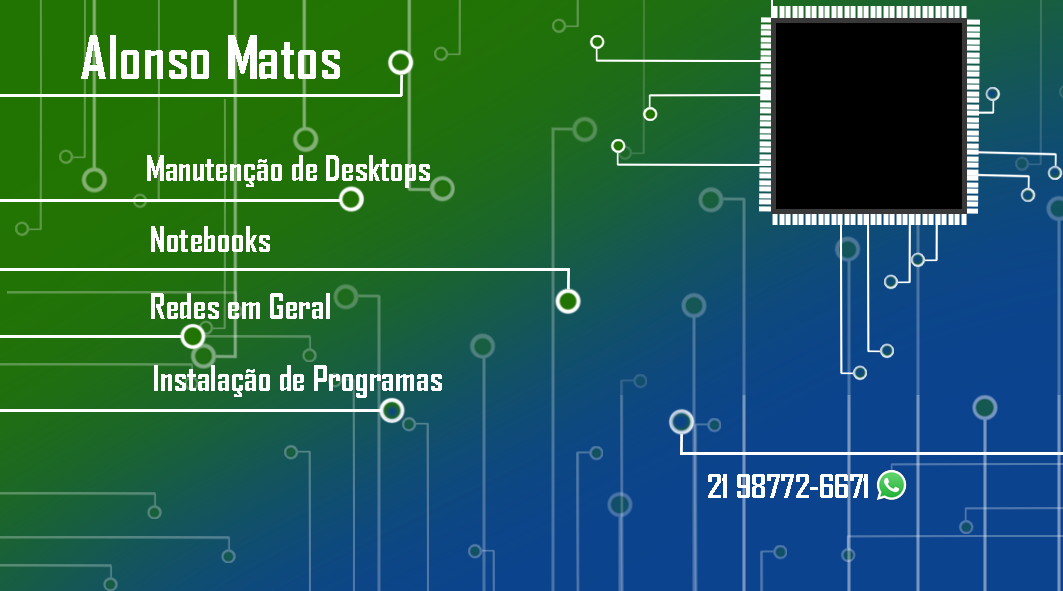
<style>
.page{position:relative;width:1063px;height:591px}
.page>*{position:absolute;margin:0}
.t1{font:58.3px "AgencyFB-Bold";color:#ffffff}
.t2{font:34.1px "AgencyFB-Bold";color:#ffffff}
.t3{font:32.3px "AgencyFB-Bold";color:#ffffff}
</style>
<div class="page">
<p class="t1" style="left:81px;top:35px;width:259px;height:44px">Alonso Matos</p>
<p class="t2" style="left:147px;top:155px;width:283px;height:33px">Manutenção de Desktops</p>
<p class="t2" style="left:151px;top:226px;width:119px;height:26px">Notebooks</p>
<p class="t2" style="left:151px;top:293px;width:179px;height:26px">Redes em Geral</p>
<p class="t2" style="left:154px;top:365px;width:288px;height:33px">Instalação de Programas</p>
<p class="t3" style="left:708px;top:474px;width:160px;height:24px">21 98772-6671</p>
</div>
